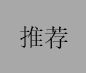
<style>
.page{position:relative;width:86px;height:73px;background:#a9a8a8}
.page>*{position:absolute;margin:0}
.t1{font:25px "SimSun";color:#000000}
</style>
<div class="page">
<p class="t1" style="left:20px;top:26px;width:48px;height:23px">推荐</p>
</div>
